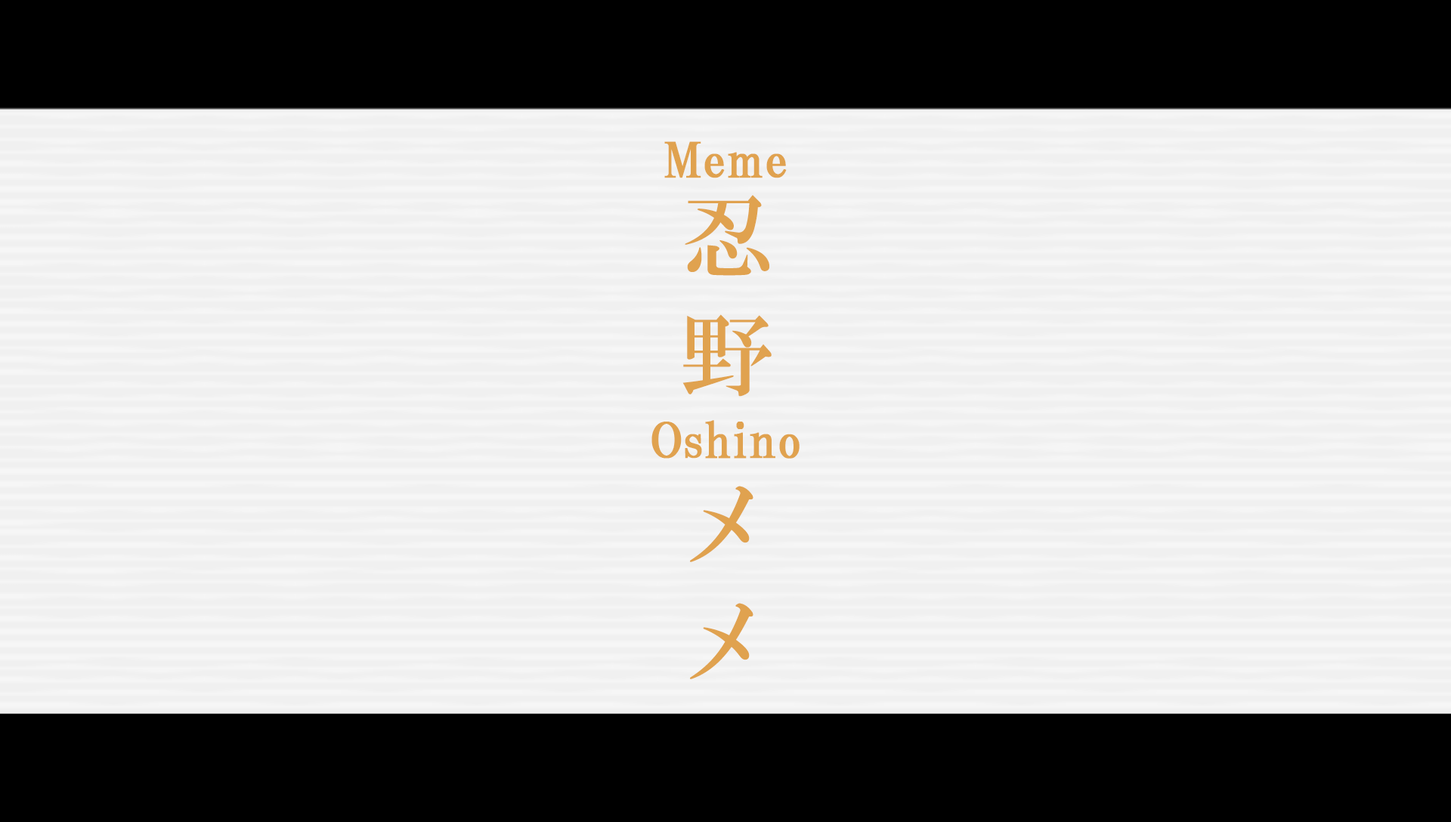
<style>
.page{position:relative;width:1451px;height:822px;background:#f0f0f0}
.page>*{position:absolute;margin:0}
.t1{font:48.4px/52.1px "HGPMinchoB";letter-spacing:0.01em;color:#e0a24f;font-weight:bold}
.t2{font:93.7px/92.9px "HGMinchoB";letter-spacing:0.25em;color:#e0a24f}
</style>
<div class="page">
<p class="t1" style="left:651px;top:141px;width:148px;height:318px;text-align:center">Meme<br><br><br><br><br>Oshino</p>
<p class="t2" style="left:682px;top:195px;width:89px;height:484px">忍野 メメ</p>
</div>
